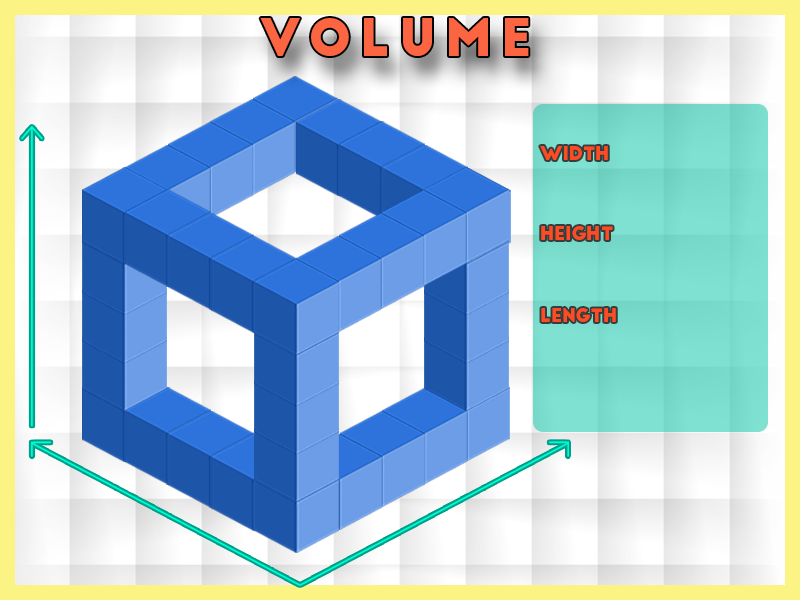
<style>
.page{position:relative;width:800px;height:600px}
.page>*{position:absolute;margin:0}
.t1{font:50px "BigJohn";letter-spacing:0.18em;color:#fb6542}
.t2{font:18px "BigJohn";color:#fb4c23}
</style>
<div class="page">
<p class="t1" style="left:260px;top:18px;width:269px;height:38px">Volume</p>
<p class="t2" style="left:540px;top:146px;width:68px;height:14px">Width</p>
<p class="t2" style="left:541px;top:226px;width:72px;height:14px">Height</p>
<p class="t2" style="left:541px;top:308px;width:75px;height:14px">length</p>
</div>
